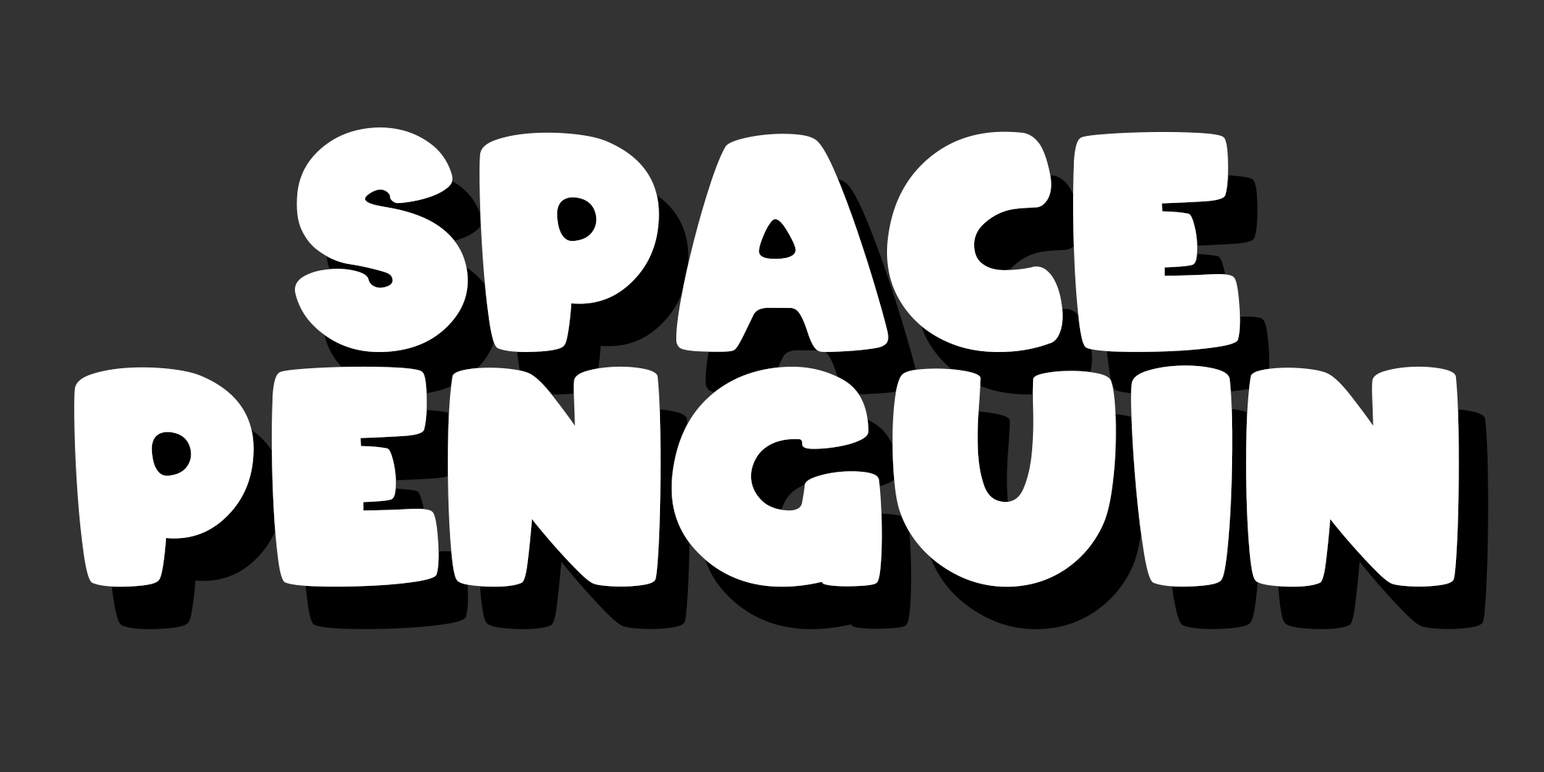
<style>
.page{position:relative;width:1544px;height:772px;background:#333333}
.page>*{position:absolute;margin:0}
.t1{font:293.4px "ARCO-Typography-Regular";color:#ffffff}
</style>
<div class="page">
<p class="t1" style="left:74px;top:127px;width:1385px;height:460px">SPACE PENGUIN</p>
</div>
